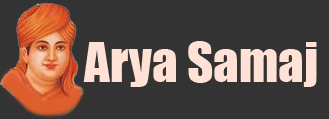
<style>
.page{position:relative;width:329px;height:119px;background:#333333}
.page>*{position:absolute;margin:0}
.t1{font:51px "Impact";color:#ffe1d4}
</style>
<div class="page">
<p class="t1" style="left:83px;top:41px;width:234px;height:46px">Arya Samaj</p>
</div>
